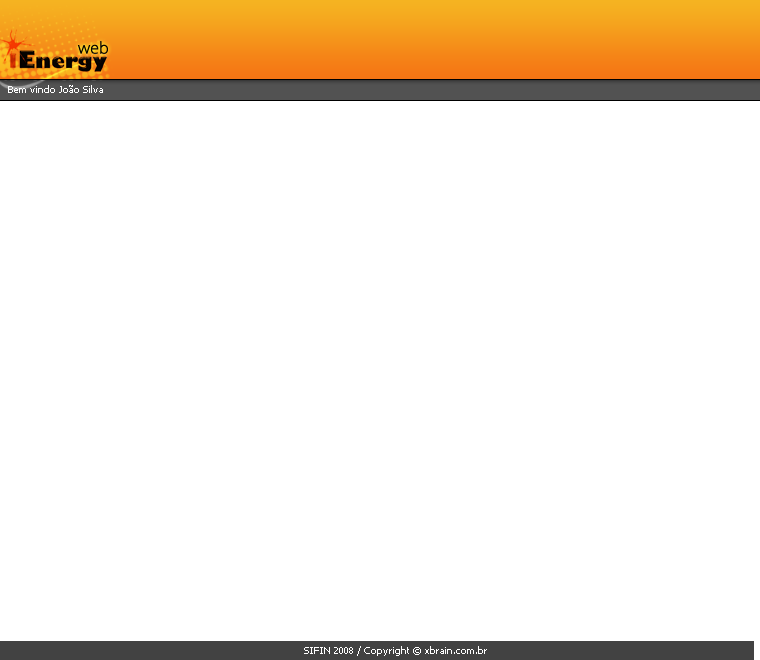
<style>
.page{position:relative;width:760px;height:660px;background:#ffffff}
.page>*{position:absolute;margin:0}
.t1{font:15.3px "KozGoPro-ExtraLight";color:#050200;font-weight:bold}
.t2{font:15.3px "KozGoPro-ExtraLight"}
.t3{font:10px "Tahoma";color:#ffffff}
</style>
<div class="page">
<p class="t1" style="left:78px;top:41px;width:30px;height:13px">web</p>
<p class="t2" style="left:78px;top:53px;width:29px;height:13px">web</p>
<p class="t3" style="left:8px;top:85px;width:95px;height:8px">Bem vindo João Silva</p>
<p class="t3" style="left:304px;top:646px;width:183px;height:10px">SIFIN 2008 / Copyright © xbrain.com.br</p>
</div>
